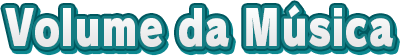
<style>
.page{position:relative;width:400px;height:56px;background:#ffffff}
.page>*{position:absolute;margin:0}
.t1{font:48.7px "RodinPro-UB";letter-spacing:0.014em;color:#efeff0;scale:0.79 1}
</style>
<div class="page">
<p class="t1" style="left:5px;top:5px;width:388px;height:42px">Volume da Música</p>
</div>
